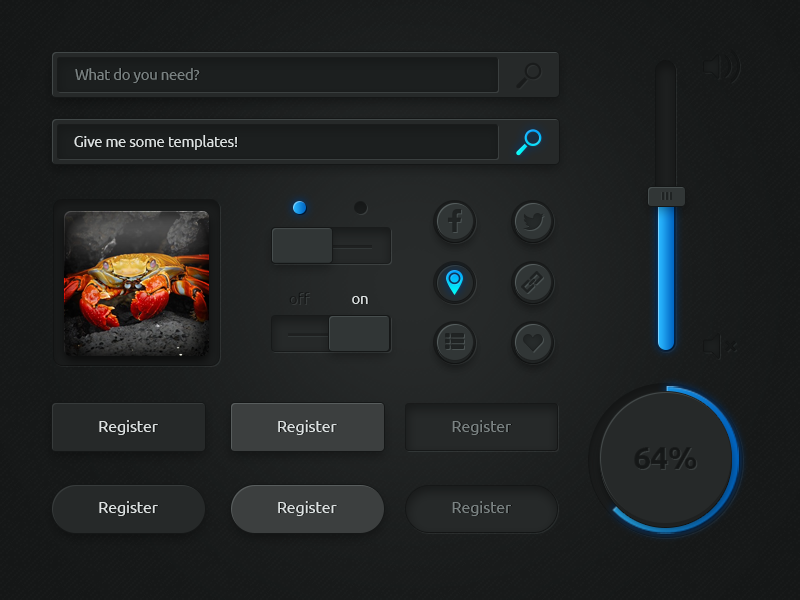
<style>
.page{position:relative;width:800px;height:600px}
.page>*{position:absolute;margin:0}
.t1{font:14.7px "Ubuntu";letter-spacing:-0.01em;color:#7a8282}
.t2{font:14.7px "Ubuntu";letter-spacing:-0.01em;color:#dde2e2}
.t3{font:14.7px "Ubuntu";letter-spacing:-0.01em;color:#191b1b}
.t4{font:16px "Ubuntu";letter-spacing:-0.01em;color:#dde2e2}
.t5{font:16px "Ubuntu";letter-spacing:-0.01em;color:#7a8282}
.t6{font:32px "Ubuntu-Bold";letter-spacing:-0.01em;color:#161818}
</style>
<div class="page">
<p class="t1" style="left:75px;top:68px;width:125px;height:15px">What do you need?</p>
<p class="t2" style="left:74px;top:135px;width:163px;height:15px">Give me some templates!</p>
<p class="t3" style="left:289px;top:292px;width:21px;height:12px">off</p>
<p class="t2" style="left:352px;top:296px;width:16px;height:8px">on</p>
<p class="t4" style="left:99px;top:420px;width:59px;height:15px">Register</p>
<p class="t4" style="left:278px;top:420px;width:59px;height:15px">Register</p>
<p class="t5" style="left:452px;top:420px;width:59px;height:15px">Register</p>
<p class="t6" style="left:634px;top:447px;width:63px;height:22px">64%</p>
<p class="t4" style="left:99px;top:501px;width:59px;height:15px">Register</p>
<p class="t4" style="left:278px;top:501px;width:59px;height:15px">Register</p>
<p class="t5" style="left:452px;top:501px;width:59px;height:15px">Register</p>
</div>
